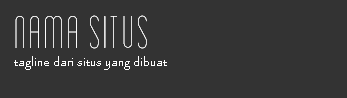
<style>
.page{position:relative;width:347px;height:98px;background:#333333}
.page>*{position:absolute;margin:0}
.t1{font:48px "Blanch-CondensedLight";color:#ffffff}
.t2{font:12px "Papyrus-Regular";color:#ffffff}
</style>
<div class="page">
<p class="t1" style="left:15px;top:15px;width:132px;height:34px">Nama Situs</p>
<p class="t1" style="left:15px;top:15px;width:132px;height:34px">Nama Situs</p>
<p class="t1" style="left:15px;top:15px;width:132px;height:34px">Nama Situs</p>
<p class="t2" style="left:14px;top:56px;width:153px;height:14px">tagline dari situs yang dibuat</p>
</div>
